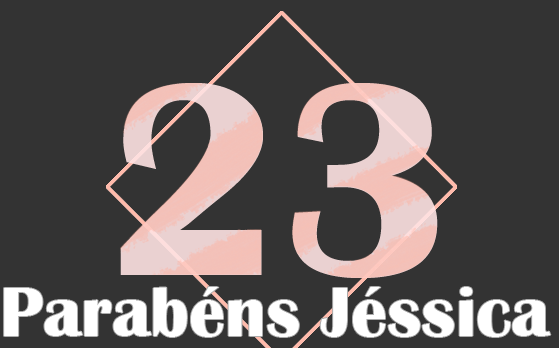
<style>
.page{position:relative;width:559px;height:348px;background:#333333}
.page>*{position:absolute;margin:0}
.t1{font:283.2px "BritannicBold";color:#f2c5be}
.t2{font:71.9px "BritannicBold";color:#ffffff}
</style>
<div class="page">
<p class="t1" style="left:120px;top:83px;width:318px;height:195px">23</p>
<p class="t2" style="left:4px;top:287px;width:547px;height:50px">Parabéns Jéssica</p>
</div>
